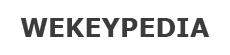
<style>
.page{position:relative;width:230px;height:55px;background:#ffffff}
.page>*{position:absolute;margin:0}
.t1{font:25px "Verdana-Bold";letter-spacing:0.001em;color:#3c3c3c;text-transform:uppercase}
</style>
<div class="page">
<p class="t1" style="left:20px;top:18px;width:190px;height:19px">Wekeypedia</p>
</div>
